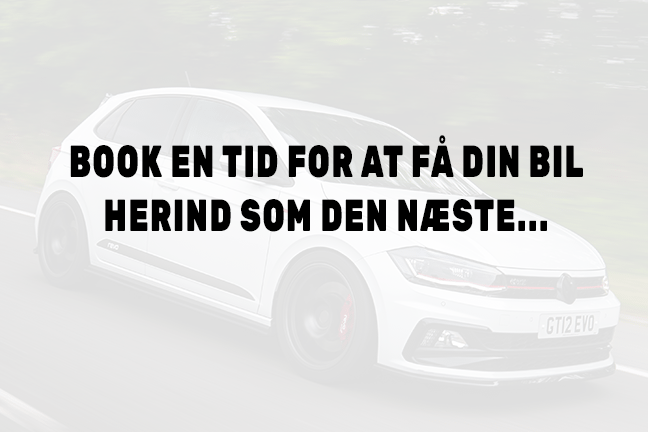
<style>
.page{position:relative;width:648px;height:432px}
.page>*{position:absolute;margin:0}
.t1{font:45px/27.2px "Rubik-Black";letter-spacing:0.05em;color:#000000;scale:0.67 1}
</style>
<div class="page">
<p class="t1" style="left:70px;top:135px;width:513px;height:97px;text-align:center">BOOK EN TID FOR AT FÅ DIN BIL<br><br>HERIND SOM DEN NÆSTE...</p>
</div>
